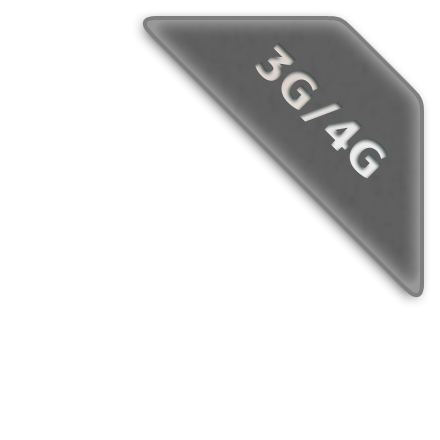
<style>
.page{position:relative;width:440px;height:440px;background:#ffffff}
.page>*{position:absolute;margin:0}
.t1{font:48px "mplus-1p-black"}
</style>
<div class="page">
<p class="t1" style="left:255px;top:42px;width:133px;height:137px;rotate:45deg">3G/4G</p>
</div>
